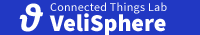
<style>
.page{position:relative;width:200px;height:35px;background:#2138c3}
.page>*{position:absolute;margin:0}
.t1{font:40px "Calibri-BoldItalic";letter-spacing:0.025em;color:#ffffff}
.t2{font:12px "SourceSansPro-Regular";letter-spacing:0.025em;color:#ffffff}
.t3{font:24px "SourceSansPro-Black";color:#ffffff}
</style>
<div class="page">
<p class="t1" style="left:19px;top:3px;width:24px;height:29px">ϑ</p>
<p class="t2" style="left:50px;top:2px;width:117px;height:12px">Connected Things Lab</p>
<p class="t3" style="left:49px;top:13px;width:117px;height:23px">VeliSphere</p>
</div>
